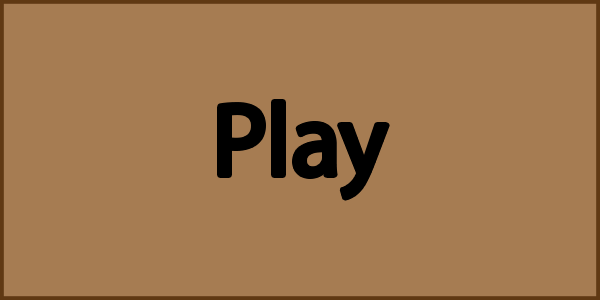
<style>
.page{position:relative;width:600px;height:300px;background:#a67c52}
.page>*{position:absolute;margin:0}
.t1{font:103px "MyriadPro-Regular";color:#000000}
.t2{font:72px "MyriadPro-Regular";color:#000000}
</style>
<div class="page">
<p class="t1" style="left:220px;top:102px;width:167px;height:96px"><span class="t2"><br></span>Play</p>
</div>
